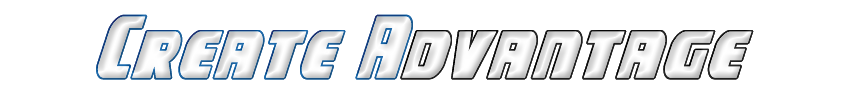
<style>
.page{position:relative;width:850px;height:100px;background:#ffffff}
.page>*{position:absolute;margin:0}
.t1{font:75px "CampJusticeOutlineItalic"}
</style>
<div class="page">
<p class="t1" style="left:96px;top:14px;width:658px;height:66px">Create Advantage</p>
</div>
